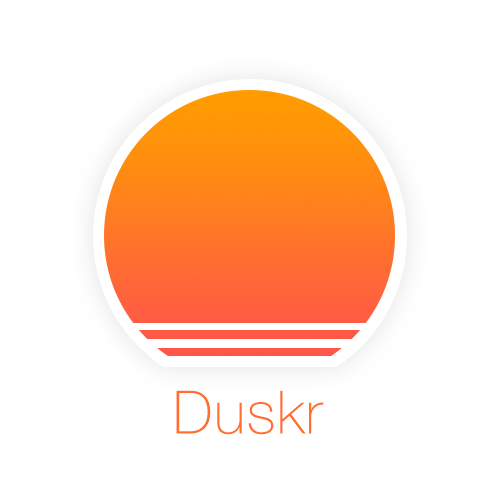
<style>
.page{position:relative;width:500px;height:500px;background:#ffffff}
.page>*{position:absolute;margin:0}
.t1{font:59.7px "HelveticaNeue-Thin";letter-spacing:0.025em;color:#ff702e}
</style>
<div class="page">
<p class="t1" style="left:176px;top:390px;width:148px;height:45px">Duskr</p>
</div>
